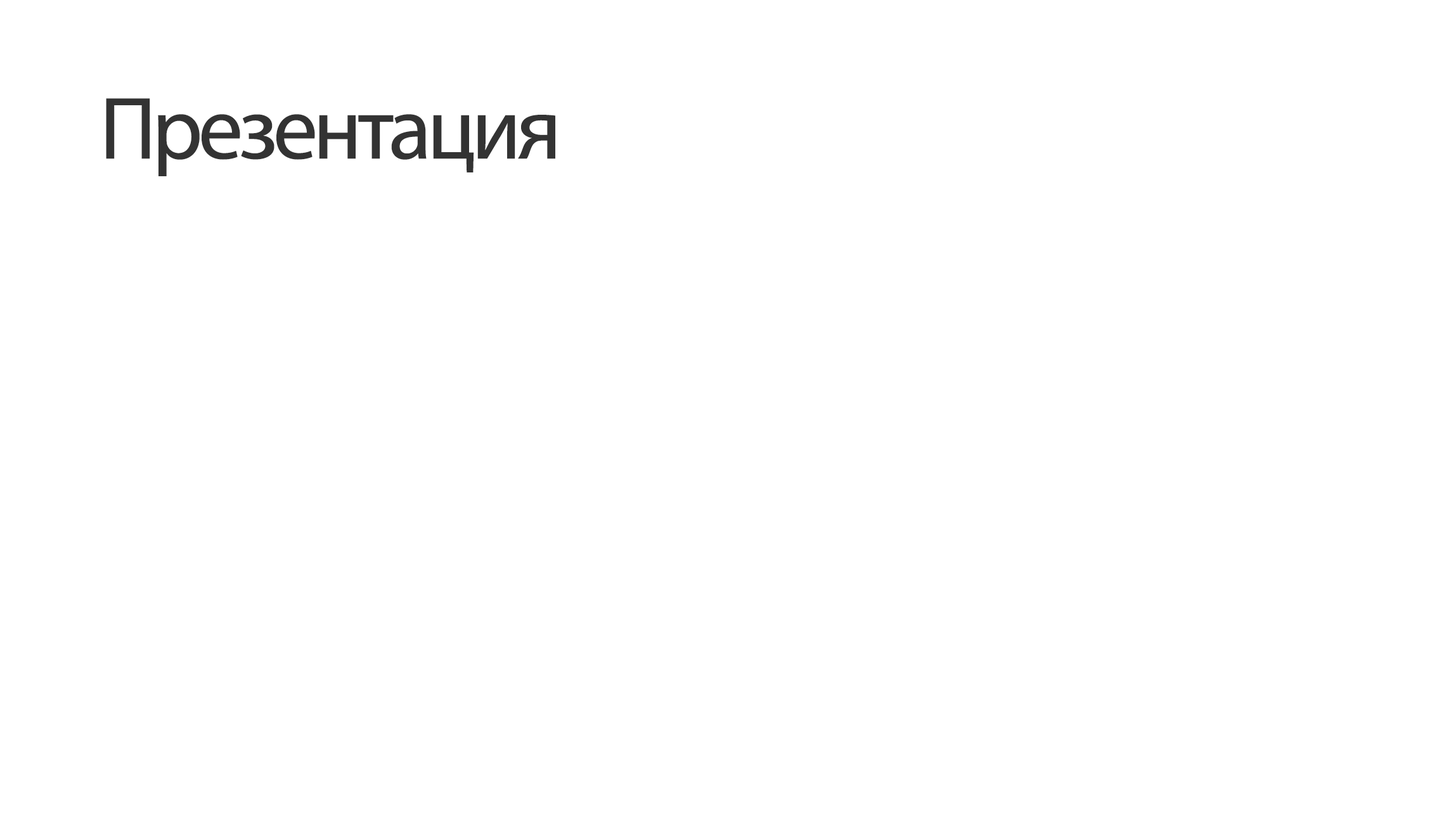
<style>
.page{position:relative;width:1432px;height:833px;background:#ffffff}
.page>*{position:absolute;margin:0}
.t1{font:89px "MyriadPro-Regular";letter-spacing:-0.075em;color:#333333;font-weight:bold}
</style>
<div class="page">
<p class="t1" style="left:106px;top:98px;width:449px;height:78px">Презентация</p>
</div>
